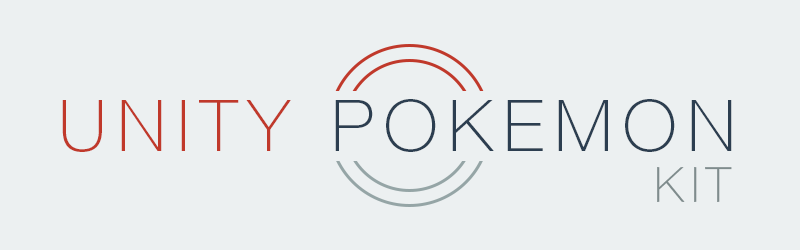
<style>
.page{position:relative;width:800px;height:250px;background:#ecf0f1}
.page>*{position:absolute;margin:0}
.t1{font:72px "HelveticaNeueLTPro-Th";letter-spacing:0.15em;color:#2c3e50;text-transform:uppercase}
.t2{font:72px "HelveticaNeueLTPro-Th";letter-spacing:0.15em;color:#c0392b;text-transform:uppercase}
.t3{font:48px "HelveticaNeueLTPro-Th";letter-spacing:0.15em;color:#7f8c8d;text-transform:uppercase}
</style>
<div class="page">
<p class="t1" style="left:62px;top:99px;width:670px;height:53px"><span class="t2">unity </span>pokemon</p>
<p class="t3" style="left:657px;top:167px;width:75px;height:35px">kit</p>
</div>
